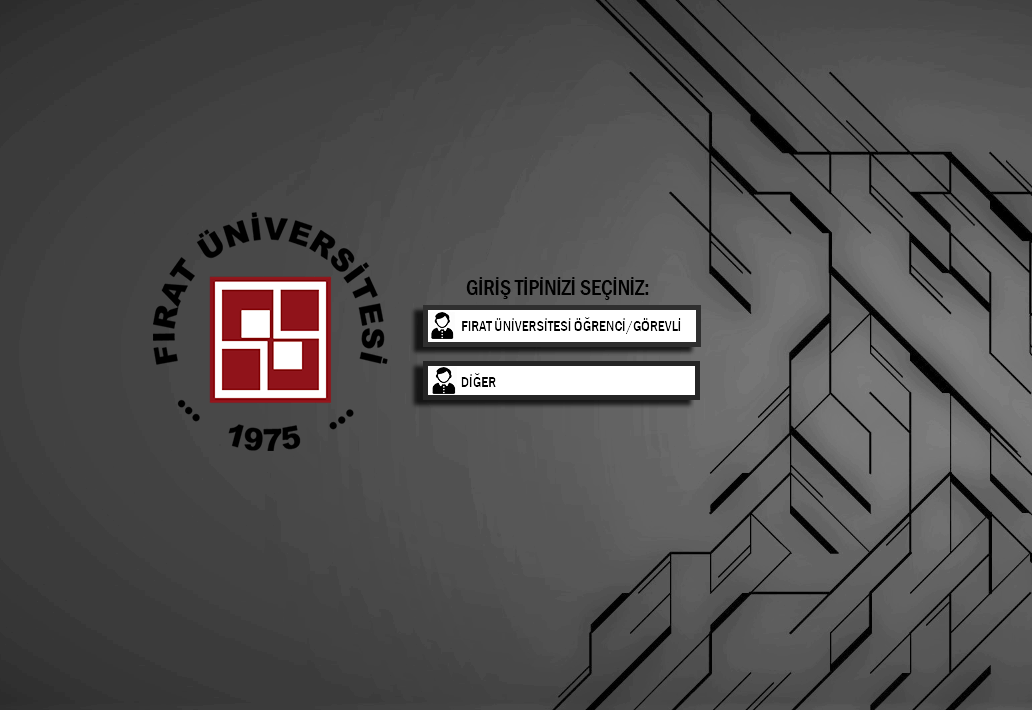
<style>
.page{position:relative;width:1032px;height:710px}
.page>*{position:absolute;margin:0}
.t1{font:21.7px "FranklinGothic-MediumCond";color:#000000}
.t2{font:15px "FranklinGothic-MediumCond";color:#000000}
</style>
<div class="page">
<p class="t1" style="left:466px;top:277px;width:183px;height:23px">GİRİŞ TİPİNİZİ SEÇİNİZ:</p>
<p class="t2" style="left:462px;top:317px;width:219px;height:17px">FIRAT ÜNİVERSİTESİ ÖĞRENCİ/GÖREVLİ</p>
<p class="t2" style="left:461px;top:373px;width:35px;height:14px">DİĞER</p>
</div>
